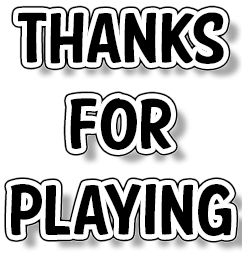
<style>
.page{position:relative;width:242px;height:255px;background:#ffffff}
.page>*{position:absolute;margin:0}
.t1{font:72px "FTYSPEEDYCASUALNCV";color:#000000}
</style>
<div class="page">
<p class="t1" style="left:10px;top:12px;width:222px;height:224px;text-align:center">Thanks<br>For<br>Playing</p>
</div>
